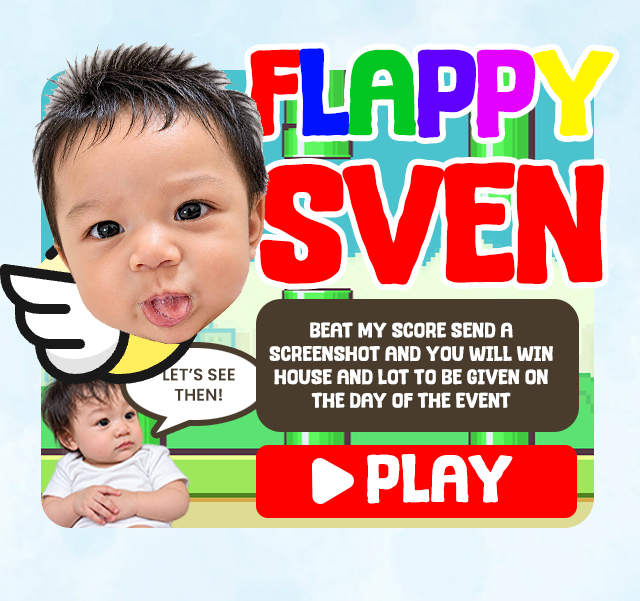
<style>
.page{position:relative;width:640px;height:601px}
.page>*{position:absolute;margin:0}
.t1{font:113.2px "TasteBread";letter-spacing:-0.04em;color:#ff0000;text-transform:uppercase}
.t2{font:113.2px "TasteBread";letter-spacing:-0.04em;color:#0012ff;text-transform:uppercase}
.t3{font:113.2px "TasteBread";letter-spacing:-0.04em;color:#00c821;text-transform:uppercase}
.t4{font:113.2px "TasteBread";letter-spacing:-0.04em;color:#6000ff;text-transform:uppercase}
.t5{font:113.2px "TasteBread";letter-spacing:-0.04em;color:#e400ff;text-transform:uppercase}
.t6{font:113.2px "TasteBread";letter-spacing:-0.04em;color:#fff600;text-transform:uppercase}
.t7{font:156px "TasteBread";letter-spacing:-0.04em;color:#ff0000;text-transform:uppercase}
.t8{font:19.5px "TasteBread";color:#ffffff;text-transform:uppercase}
.t9{font:16.9px "Poppins-SemiBold";color:#493c2d;text-transform:uppercase}
.t10{font:62.6px "TasteBread";color:#ffffff;text-transform:uppercase}
</style>
<div class="page">
<p class="t1" style="left:250px;top:48px;width:364px;height:90px">F<span class="t2">l</span><span class="t3">a</span><span class="t4">p</span><span class="t5">p</span><span class="t6">y</span></p>
<p class="t7" style="left:260px;top:162px;width:344px;height:123px">SVEN</p>
<p class="t8" style="left:269px;top:322px;width:284px;height:86px;text-align:center">BEAT MY SCORE SEND A<br>SCREENSHOT AND YOU WILL WIN<br>HOUSE AND LOT TO BE GIVEN ON<br>THE DAY OF THE EVENT</p>
<p class="t9" style="left:163px;top:368px;width:72px;height:33px;text-align:center">LET’S SEE<br>THEN!</p>
<p class="t10" style="left:367px;top:454px;width:146px;height:50px">PLAY</p>
</div>
